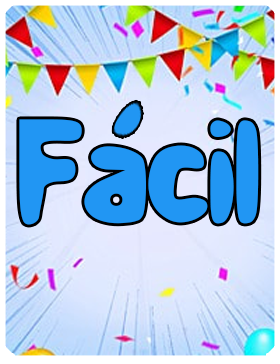
<style>
.page{position:relative;width:280px;height:364px}
.page>*{position:absolute;margin:0}
.t1{font:142.4px "Game_Time";color:#2196f3}
</style>
<div class="page">
<p class="t1" style="left:19px;top:119px;width:240px;height:106px">Facil</p>
</div>
